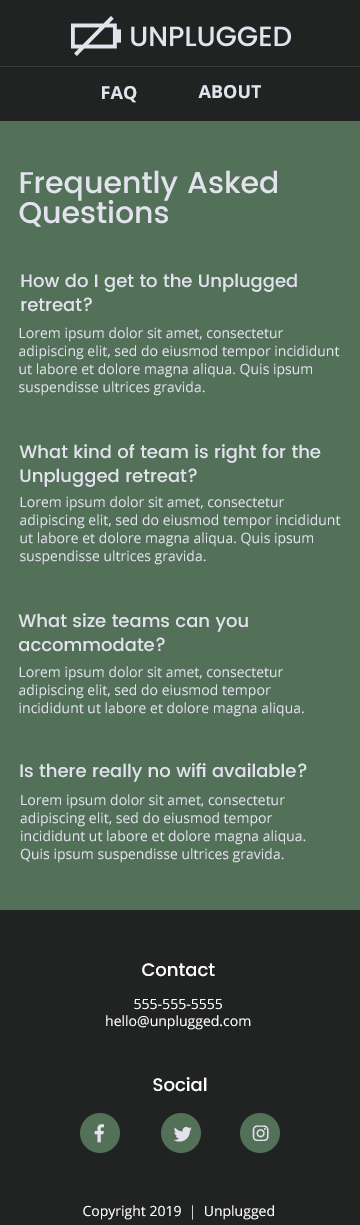
<style>
.page{position:relative;width:360px;height:1225px;background:#527158}
.page>*{position:absolute;margin:0}
.t1{font:18px "OpenSans-Bold";color:#e2e3ed}
.t2{font:30px/30px "Poppins-Medium";color:#e2e3ed}
.t3{font:18px/24px "Poppins-Medium";color:#e2e3ed}
.t4{font:14px/18px "OpenSans";color:#e2e3ed}
.t5{font:18px "Poppins-Medium";color:#e2e3ed}
.t6{font:18px "Poppins-Medium";color:#ffffff}
.t7{font:14px "OpenSans";color:#ffffff}
</style>
<div class="page">
<p class="t1" style="left:102px;top:86px;width:35px;height:17px">FAQ</p>
<p class="t1" style="left:198px;top:85px;width:63px;height:14px">ABOUT</p>
<p class="t2" style="left:19px;top:170px;width:258px;height:57px">Frequently Asked <br>Questions</p>
<p class="t3" style="left:21px;top:273px;width:276px;height:39px">How do I get to the Unplugged retreat?</p>
<p class="t4" style="left:19px;top:327px;width:321px;height:69px">Lorem ipsum dolor sit amet, consectetur adipiscing elit, sed do eiusmod tempor incididunt ut labore et dolore magna aliqua. Quis ipsum suspendisse ultrices gravida.</p>
<p class="t3" style="left:19px;top:444px;width:302px;height:43px">What kind of team is right for the Unplugged retreat?</p>
<p class="t4" style="left:20px;top:496px;width:321px;height:69px">Lorem ipsum dolor sit amet, consectetur adipiscing elit, sed do eiusmod tempor incididunt ut labore et dolore magna aliqua. Quis ipsum suspendisse ultrices gravida.</p>
<p class="t3" style="left:18px;top:613px;width:230px;height:39px">What size teams can you accommodate?</p>
<p class="t4" style="left:19px;top:666px;width:285px;height:51px">Lorem ipsum dolor sit amet, consectetur adipiscing elit, sed do eiusmod tempor incididunt ut labore et dolore magna aliqua.</p>
<p class="t5" style="left:20px;top:763px;width:287px;height:19px">Is there really no wifi available?</p>
<p class="t4" style="left:20px;top:794px;width:286px;height:69px">Lorem ipsum dolor sit amet, consectetur adipiscing elit, sed do eiusmod tempor incididunt ut labore et dolore magna aliqua. Quis ipsum suspendisse ultrices gravida.</p>
<p class="t6" style="left:142px;top:963px;width:73px;height:14px">Contact</p>
<p class="t7" style="left:106px;top:999px;width:145px;height:31px;text-align:center">555-555-5555<br>hello@unplugged.com</p>
<p class="t6" style="left:153px;top:1077px;width:54px;height:15px">Social</p>
<p class="t7" style="left:83px;top:1205px;width:191px;height:15px">Copyright 2019  |  Unplugged</p>
</div>
